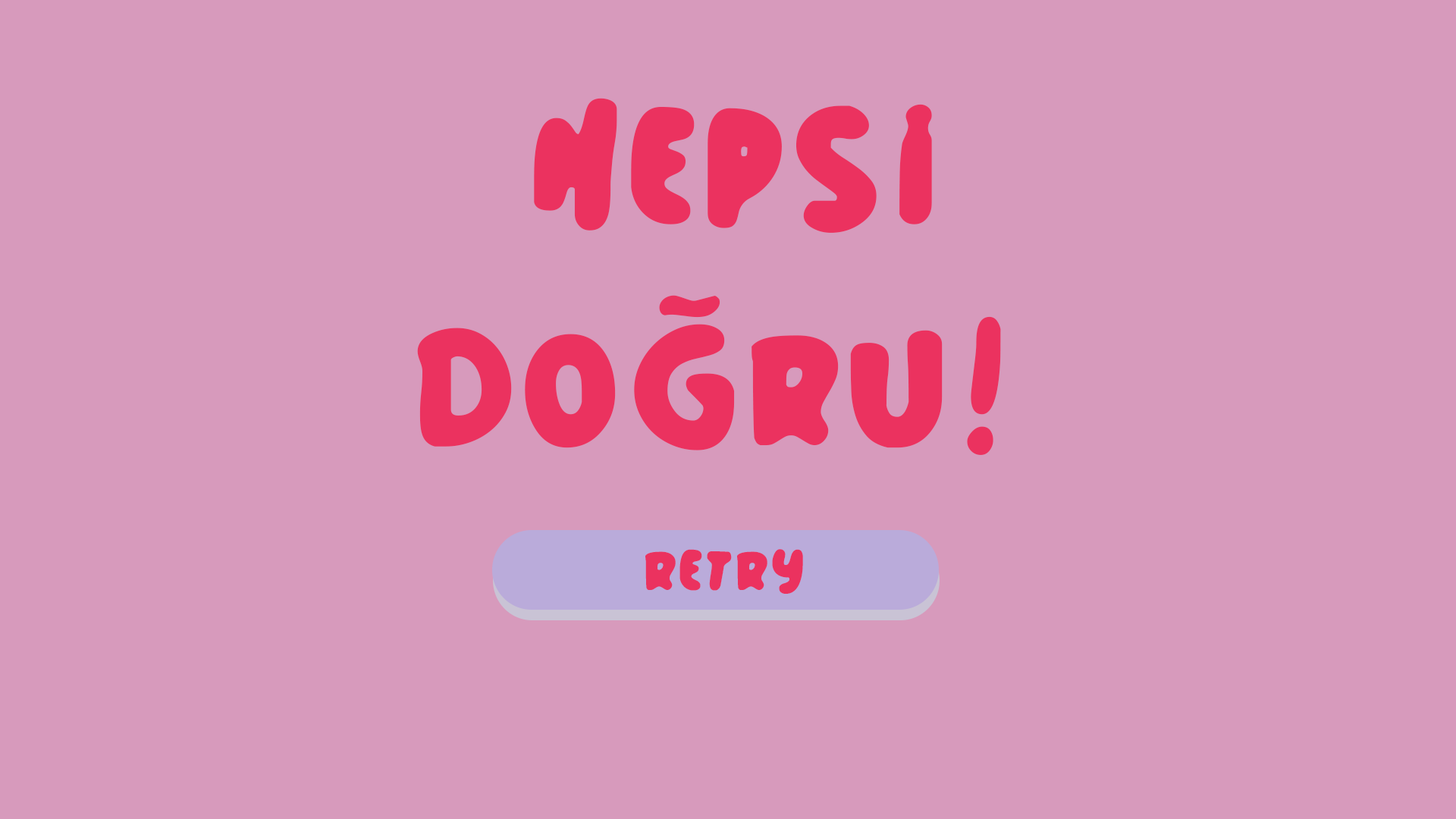
<style>
.page{position:relative;width:1456px;height:819px;background:#d79abc}
.page>*{position:absolute;margin:0}
.t1{font:185px "BomberBalloon";letter-spacing:0.08em;color:#eb325f}
.t2{font:64.5px "BomberBalloon";letter-spacing:0.08em;color:#eb325f}
</style>
<div class="page">
<p class="t1" style="left:417px;top:98px;width:584px;height:357px;text-align:right">hepsi <br>dogru!</p>
<p class="t1" style="left:659px;top:295px;width:61px;height:23px;rotate:-15deg">~</p>
<p class="t2" style="left:645px;top:549px;width:158px;height:45px">Retry</p>
</div>
